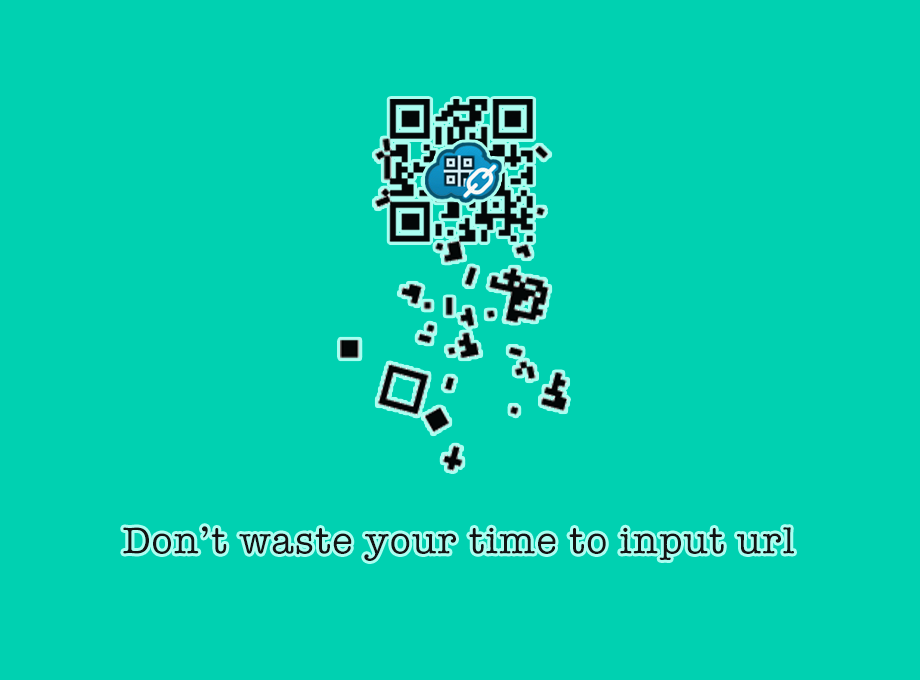
<style>
.page{position:relative;width:920px;height:680px;background:#00d1b1}
.page>*{position:absolute;margin:0}
.t1{font:38.4px "AmericanTypewriter";letter-spacing:0.04em;color:#131313}
</style>
<div class="page">
<p class="t1" style="left:123px;top:526px;width:671px;height:35px">Don’t waste your time to input url</p>
</div>
